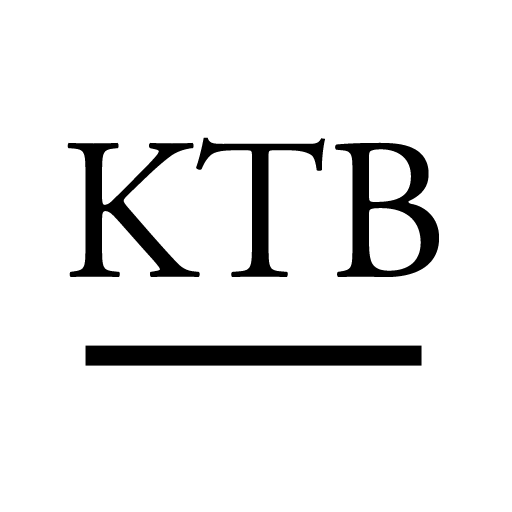
<style>
.page{position:relative;width:512px;height:512px;background:#ffffff}
.page>*{position:absolute;margin:0}
.t1{font:200px "AGaramondPro-Regular";color:#000000}
</style>
<div class="page">
<p class="t1" style="left:67px;top:137px;width:372px;height:140px">KTB</p>
</div>
